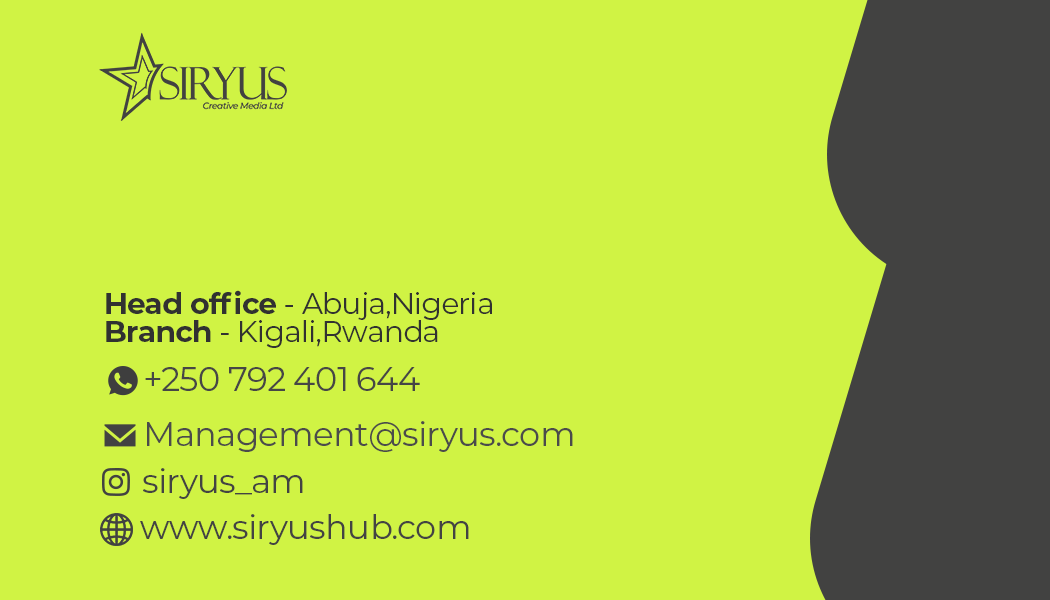
<style>
.page{position:relative;width:1050px;height:600px;background:#d0f344}
.page>*{position:absolute;margin:0}
.t1{font:29.5px "Montserrat-Regular";letter-spacing:-0.02em;color:#313131}
.t2{font:29.5px "Montserrat-Bold";letter-spacing:-0.02em;color:#313131;text-transform:uppercase}
.t3{font:29.5px "Montserrat-Bold";letter-spacing:-0.02em;color:#313131}
.t4{font:33.3px "Montserrat-Regular";letter-spacing:-0.02em;color:#464646}
.t5{font:33.3px "Montserrat-Regular";letter-spacing:-0.02em;color:#4b4b4b}
.t6{font:33.3px "Montserrat-Regular";letter-spacing:-0.02em;color:#434343}
</style>
<div class="page">
<p class="t1" style="left:106px;top:290px;width:386px;height:30px"><span class="t2">H</span><span class="t3">ead office</span> - Abuja,Nigeria</p>
<p class="t1" style="left:106px;top:320px;width:332px;height:28px"><span class="t2">b</span><span class="t3">ranch </span>- Kigali,Rwanda</p>
<p class="t4" style="left:145px;top:367px;width:275px;height:24px">+250 792 401 644</p>
<p class="t5" style="left:147px;top:421px;width:426px;height:31px">Management@siryus.com</p>
<p class="t6" style="left:143px;top:468px;width:160px;height:31px">siryus_am</p>
<p class="t6" style="left:140px;top:514px;width:329px;height:31px">www.siryushub.com</p>
</div>
